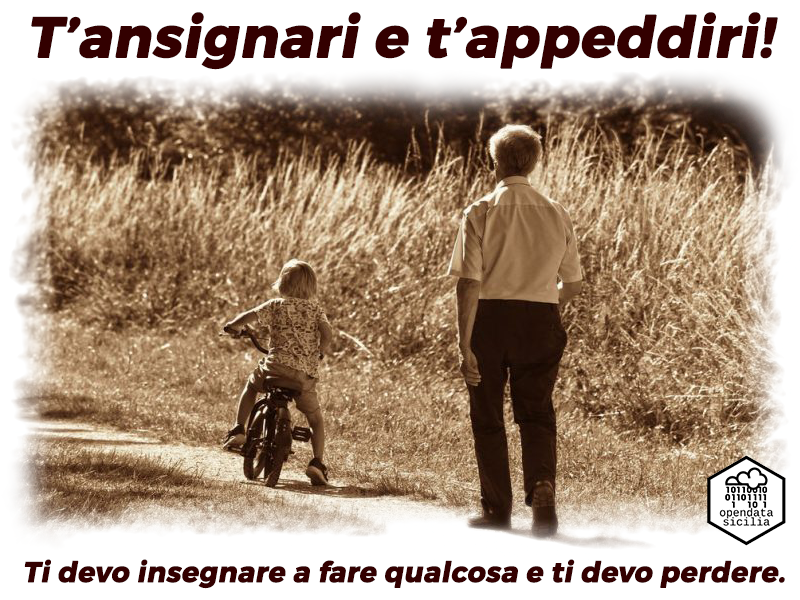
<style>
.page{position:relative;width:800px;height:600px;background:#ffffff}
.page>*{position:absolute;margin:0}
.t1{font:56px "TruenoBd";color:#330000;font-weight:bold;font-style:italic}
.t2{font:28px "TruenoBd";color:#330000;font-weight:bold;font-style:italic}
</style>
<div class="page">
<p class="t1" style="left:31px;top:12px;width:747px;height:58px">T’ansignari e t’appeddiri!</p>
<p class="t2" style="left:24px;top:559px;width:761px;height:30px">Ti devo insegnare a fare qualcosa e ti devo perdere.</p>
</div>
